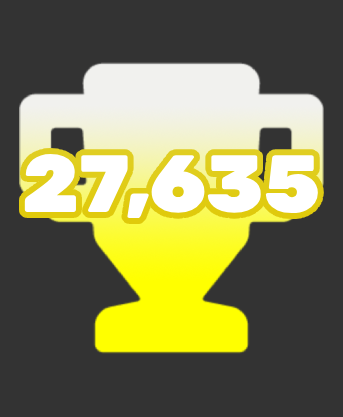
<style>
.page{position:relative;width:343px;height:417px;background:#333333}
.page>*{position:absolute;margin:0}
.t1{font:81.1px "Rubik-Black";color:#ffffff}
</style>
<div class="page">
<p class="t1" style="left:24px;top:154px;width:294px;height:64px">27,635</p>
</div>
